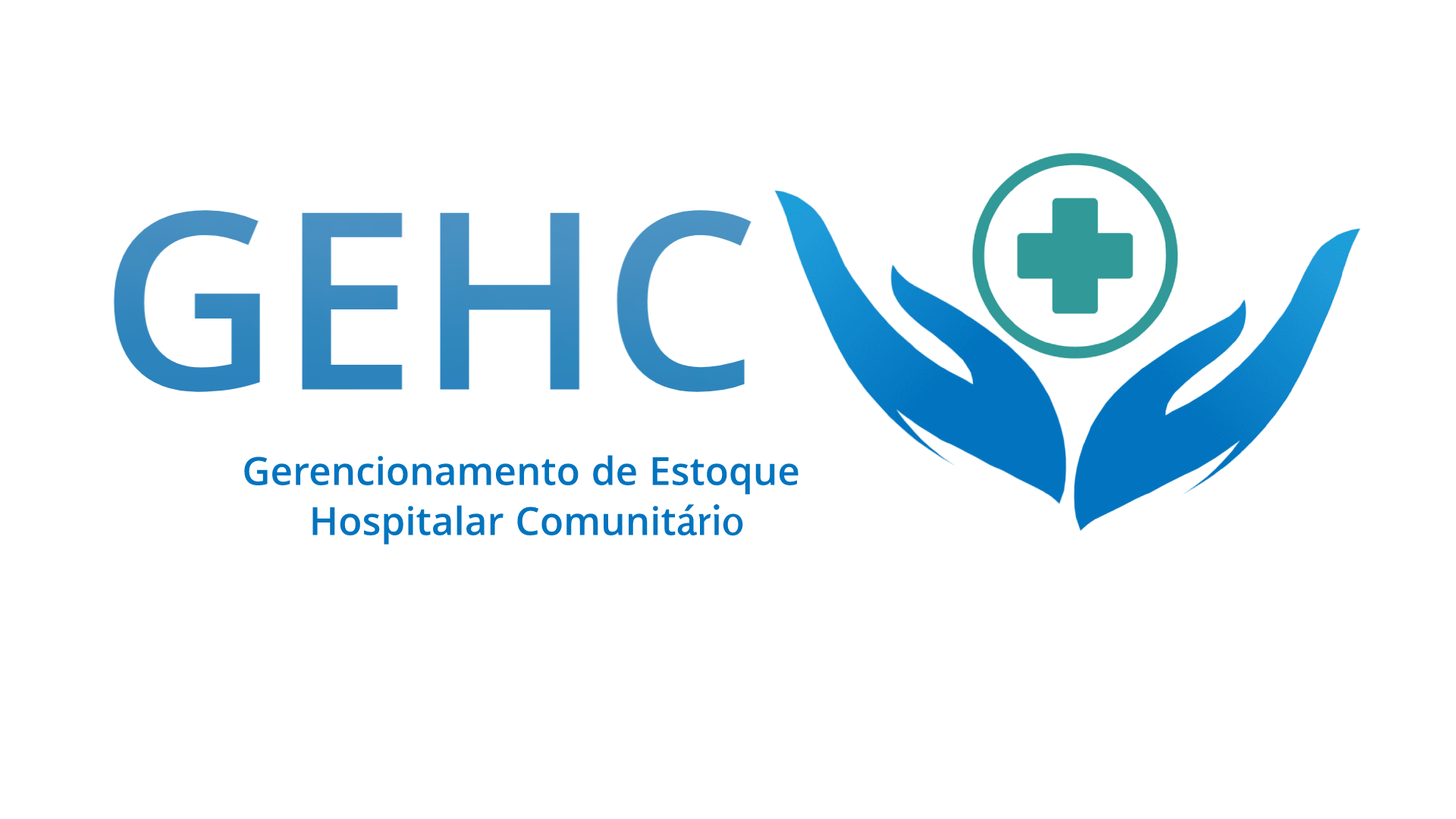
<style>
.page{position:relative;width:1456px;height:819px;background:#ffffff}
.page>*{position:absolute;margin:0}
.t1{font:41.7px "Khula-SemiBold";color:#0274bf}
.t2{font:41.7px "Rosario-SemiBold";color:#0274bf}
</style>
<div class="page">
<p class="t1" style="left:244px;top:455px;width:555px;height:89px;text-align:center">Gerencionamento de Estoque <br>Hospitalar Comunit<span class="t2">ário</span></p>
</div>
